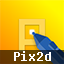
<style>
.page{position:relative;width:64px;height:64px}
.page>*{position:absolute;margin:0}
.t1{font:16px "FixedsysExcelsiorIIIb";color:#ffffff}
</style>
<div class="page">
<p class="t1" style="left:14px;top:51px;width:37px;height:10px">Pix2d</p>
</div>
